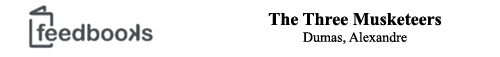
<style>
.page{position:relative;width:500px;height:57px;background:#ffffff}
.page>*{position:absolute;margin:0}
.t1{font:18px "TimesNewRomanPS-BoldMT";color:#000001}
.t2{font:14px "TimesNewRomanPSMT";color:#000001}
</style>
<div class="page">
<p class="t1" style="left:268px;top:13px;width:174px;height:32px;text-align:center">The Three Musketeers<br><span class="t2">Dumas, Alexandre</span></p>
</div>
